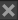
<style>
.page{position:relative;width:18px;height:20px;background:#414141}
.page>*{position:absolute;margin:0}
.t1{font:27.3px "Arial-BoldMT";letter-spacing:0.01em;color:#9b9b9b}
</style>
<div class="page">
<p class="t1" style="left:2px;top:4px;width:13px;height:13px">×</p>
</div>
